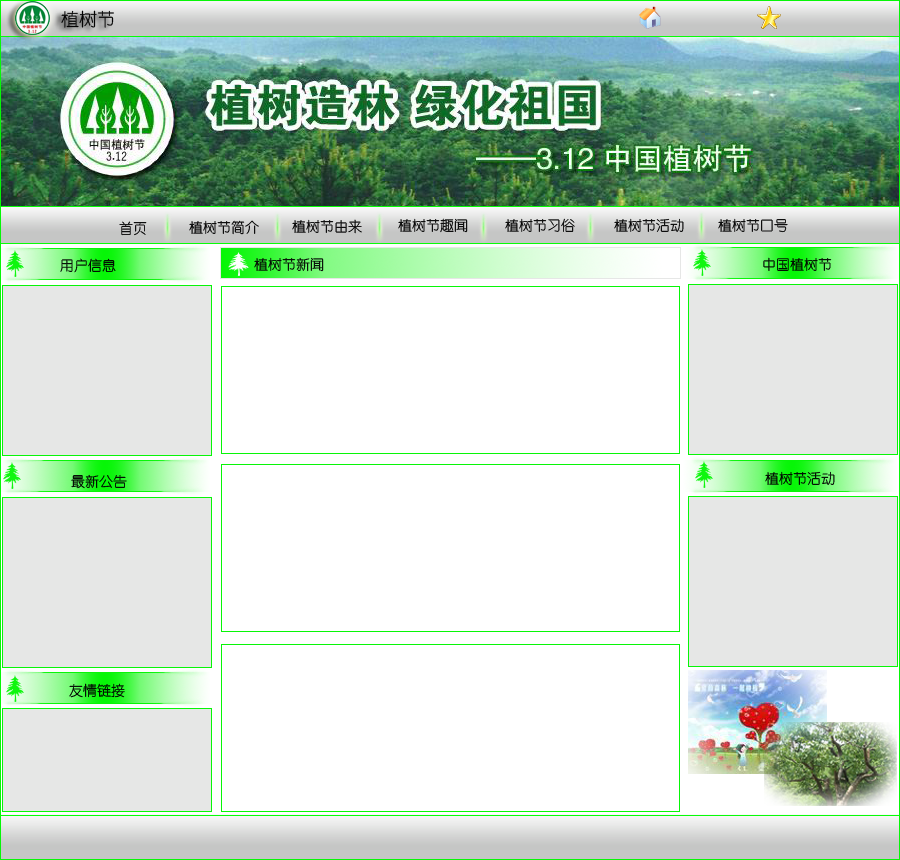
<style>
.page{position:relative;width:900px;height:860px;background:#ffffff}
.page>*{position:absolute;margin:0}
.t1{font:18px "YouYuan";color:#030303}
.t2{font:14px "YouYuan"}
.t3{font:14px "YouYuan";color:#000000}
.t4{font:14px "YouYuan";color:#030303}
</style>
<div class="page">
<p class="t1" style="left:61px;top:10px;width:53px;height:18px">植树节</p>
<p class="t2" style="left:119px;top:221px;width:28px;height:15px">首页</p>
<p class="t3" style="left:189px;top:220px;width:70px;height:15px">植树节简介</p>
<p class="t3" style="left:292px;top:219px;width:70px;height:15px">植树节由来</p>
<p class="t3" style="left:398px;top:218px;width:70px;height:15px">植树节趣闻</p>
<p class="t3" style="left:505px;top:218px;width:70px;height:14px">植树节习俗</p>
<p class="t3" style="left:614px;top:218px;width:70px;height:14px">植树节活动</p>
<p class="t3" style="left:718px;top:218px;width:70px;height:15px">植树节口号</p>
<p class="t4" style="left:254px;top:257px;width:70px;height:15px">植树节新闻</p>
<p class="t3" style="left:763px;top:257px;width:69px;height:14px">中国植树节</p>
<p class="t3" style="left:60px;top:258px;width:56px;height:15px">用户信息</p>
<p class="t3" style="left:765px;top:471px;width:70px;height:14px">植树节活动</p>
<p class="t3" style="left:71px;top:474px;width:56px;height:15px">最新公告</p>
<p class="t3" style="left:69px;top:683px;width:56px;height:15px">友情链接</p>
</div>
